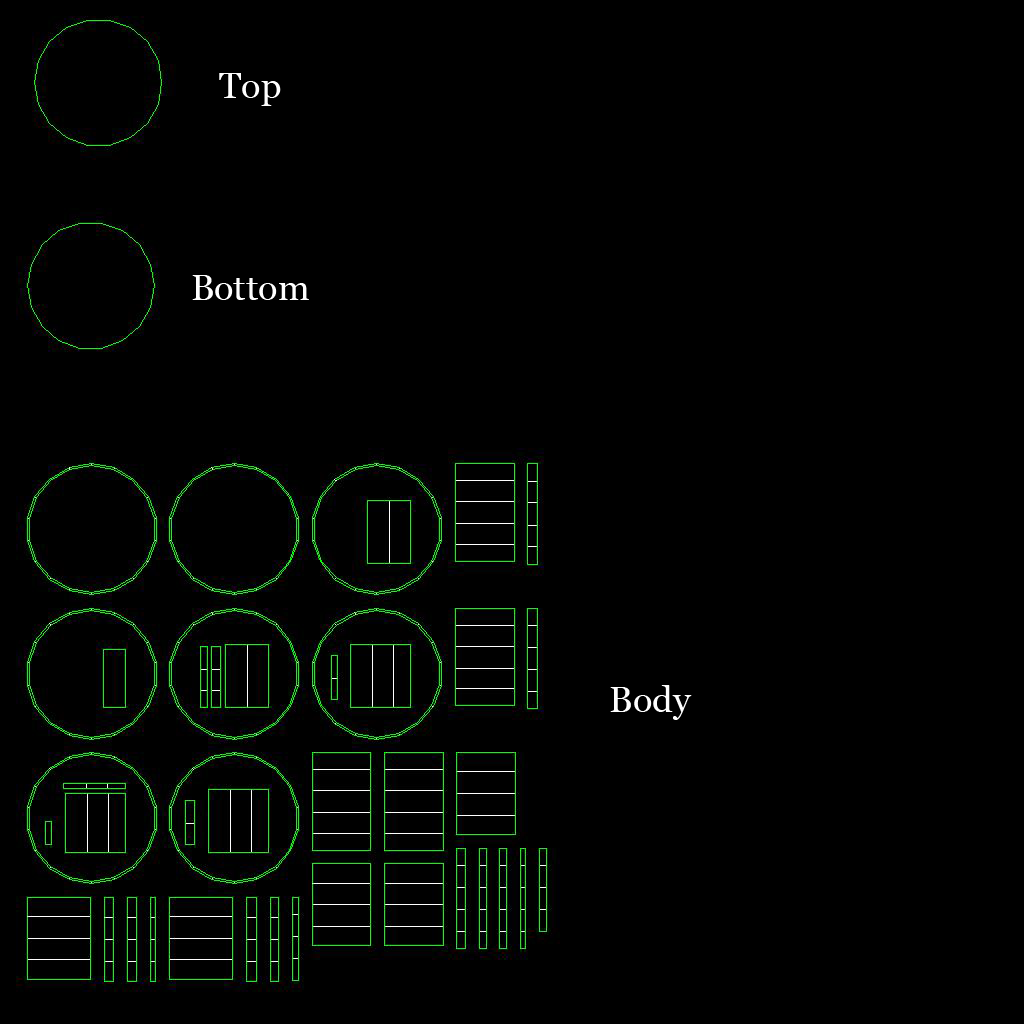
<style>
.page{position:relative;width:1024px;height:1024px;background:#000000}
.page>*{position:absolute;margin:0}
.t1{font:36px "Georgia";color:#ffffff}
</style>
<div class="page">
<p class="t1" style="left:219px;top:73px;width:62px;height:33px">Top</p>
<p class="t1" style="left:192px;top:275px;width:117px;height:25px">Bottom</p>
<p class="t1" style="left:610px;top:685px;width:82px;height:35px">Body</p>
</div>
